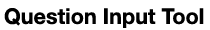
<style>
.page{position:relative;width:210px;height:30px;background:#ffffff}
.page>*{position:absolute;margin:0}
.t1{font:21.6px "HelveticaNeue-Bold";color:#000000}
</style>
<div class="page">
<p class="t1" style="left:4px;top:8px;width:200px;height:20px">Question Input Tool</p>
</div>
